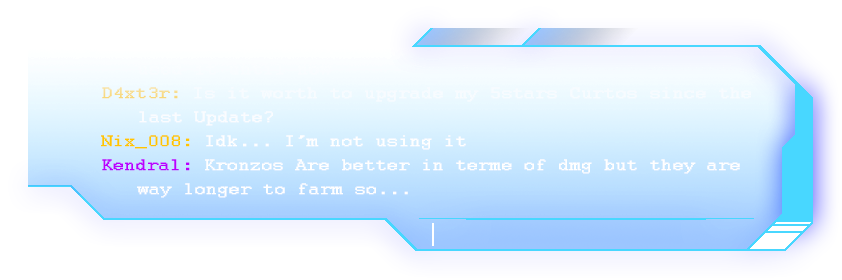
<style>
.page{position:relative;width:842px;height:280px;background:#ffffff}
.page>*{position:absolute;margin:0}
.t1{font:17px/24px "Courier";color:#ffffff;font-weight:bold;scale:1.19 1}
.t2{font:17px/24px "Courier";color:#ffc000;font-weight:bold;scale:1.19 1}
.t3{font:17px/24px "Courier";color:#ffc500;font-weight:bold;scale:1.19 1}
.t4{font:17px/24px "Courier";color:#ba00ff;font-weight:bold;scale:1.19 1}
</style>
<div class="page">
<p class="t1" style="left:101px;top:63px;width:650px;height:135px">used it until now<br><span class="t2">D4xt3r: </span>Is it worth to upgrade my 5stars Curtos since the    last Update?<br><span class="t3">Nix_008:</span> Idk... I’m not using it<br><span class="t4">Kendral:</span> Kronzos Are better in terme of dmg but they are    way longer to farm so...</p>
</div>
